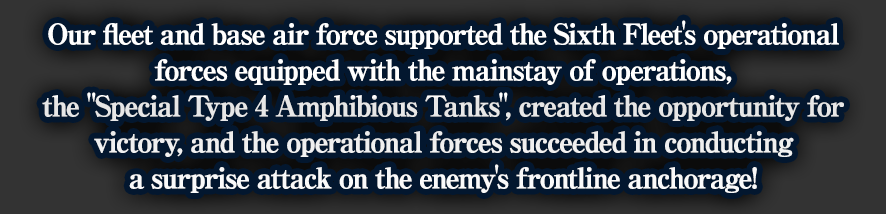
<style>
.page{position:relative;width:886px;height:214px;background:#03172f}
.page>*{position:absolute;margin:0}
.t1{font:28px/36px "RyuminPro-ExBold";letter-spacing:-0.08em;color:#ffffff;font-weight:bold}
</style>
<div class="page">
<p class="t1" style="left:42px;top:20px;width:802px;height:173px;text-align:center">Our fleet and base air force supported the Sixth Fleet's operational<br>forces equipped with the mainstay of operations,<br>the "Special Type 4 Amphibious Tanks", created the opportunity for<br>victory, and the operational forces succeeded in conducting<br>a surprise attack on the enemy's frontline anchorage!</p>
</div>
